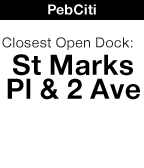
<style>
.page{position:relative;width:144px;height:168px;background:#ffffff}
.page>*{position:absolute;margin:0}
.t1{font:14px "AppleSDGothicNeo-ExtraBold";color:#ffffff}
.t2{font:14px "AppleSDGothicNeo-Regular";color:#171717}
.t3{font:28px "AppleSDGothicNeo-ExtraBold";color:#000000}
</style>
<div class="page">
<p class="t1" style="left:48px;top:4px;width:48px;height:11px">PebCiti</p>
<p class="t2" style="left:2px;top:37px;width:131px;height:13px">Closest Open Dock:</p>
<p class="t3" style="left:7px;top:54px;width:133px;height:46px">St Marks Pl &amp; 2 Ave</p>
</div>
